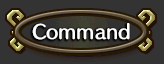
<style>
.page{position:relative;width:164px;height:64px;background:#333333}
.page>*{position:absolute;margin:0}
.t1{font:18px "FOTHummingStd-B";letter-spacing:-0.005em;color:#ffffff}
.t2{font:18px "FOTHummingStd-B";letter-spacing:-0.025em;color:#ffffff}
.t3{font:18px "FOTHummingStd-B";letter-spacing:0.005em;color:#ffffff}
</style>
<div class="page">
<p class="t1" style="left:32px;top:23px;width:98px;height:17px">Co<span class="t2">m</span><span class="t3">ma</span>nd</p>
</div>
